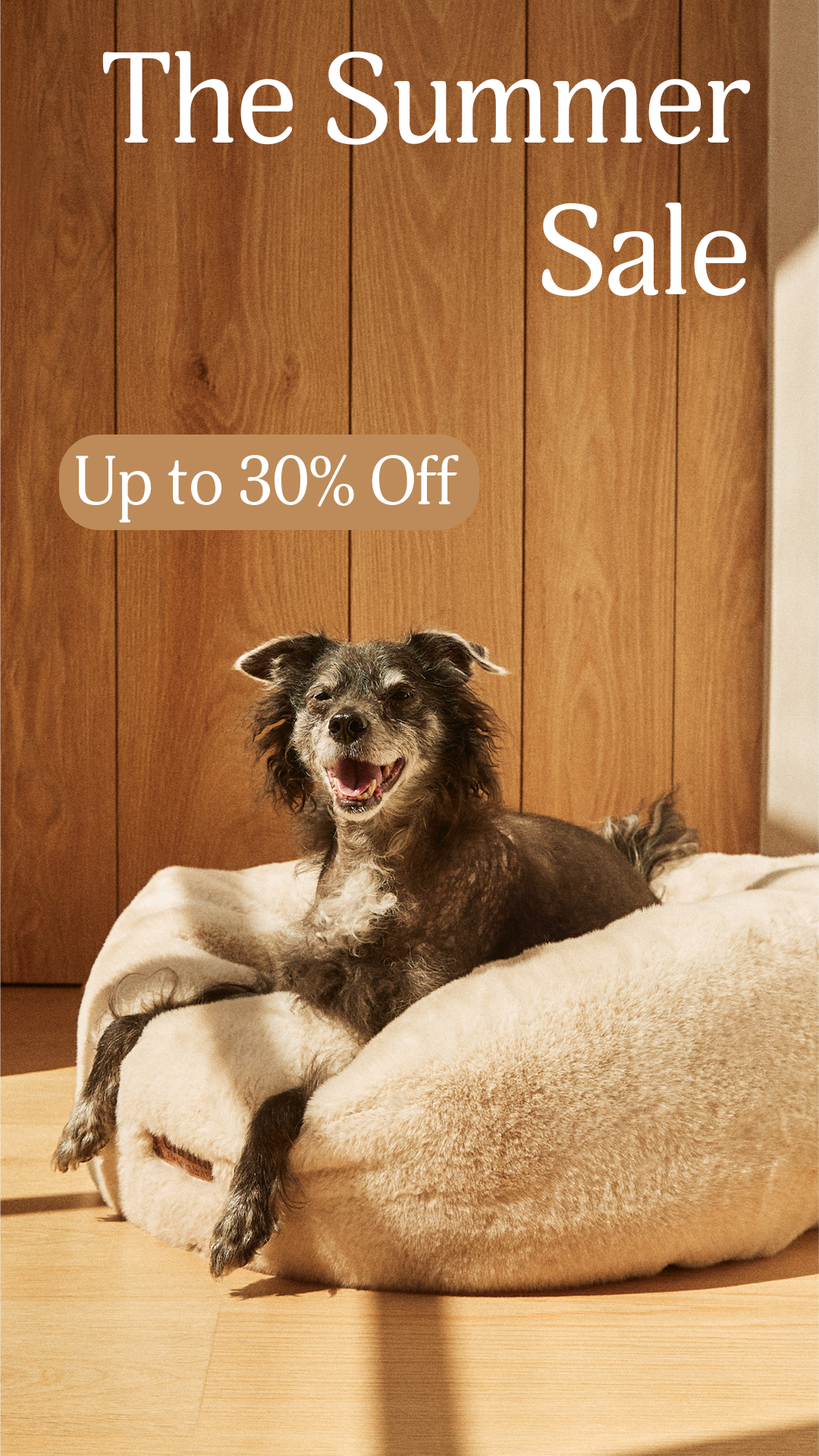
<style>
.page{position:relative;width:819px;height:1456px}
.page>*{position:absolute;margin:0}
.t1{font:126.4px "AdonisC";letter-spacing:-0.02em;color:#ffffff}
.t2{font:67.9px "AdonisC";letter-spacing:-0.02em;color:#ffffff}
</style>
<div class="page">
<p class="t1" style="left:102px;top:51px;width:648px;height:246px;text-align:right">The Summer Sale</p>
<p class="t2" style="left:76px;top:454px;width:383px;height:68px">Up to 30% Off</p>
</div>
